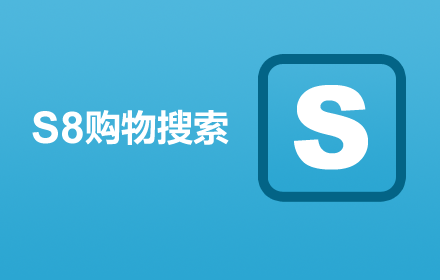
<style>
.page{position:relative;width:440px;height:280px}
.page>*{position:absolute;margin:0}
.t1{font:44px "Arial-BoldMT";color:#ffffff}
.t2{font:36px "MicrosoftYaHei-Bold";color:#ffffff}
</style>
<div class="page">
<p class="t1" style="left:32px;top:111px;width:51px;height:33px">S8</p>
<p class="t2" style="left:85px;top:109px;width:144px;height:36px">购物搜索</p>
</div>
